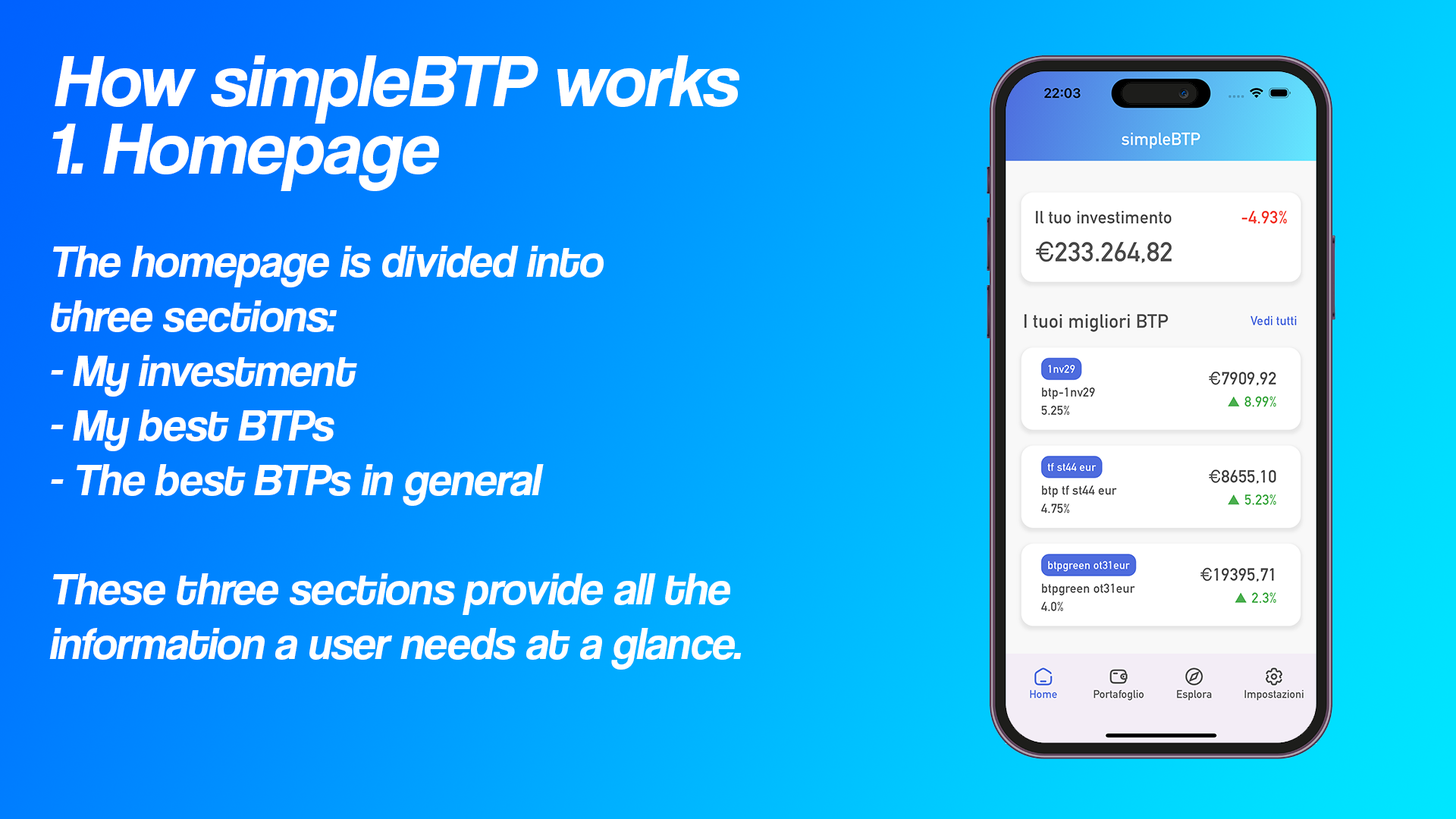
<style>
.page{position:relative;width:1456px;height:819px}
.page>*{position:absolute;margin:0}
.t1{font:75.8px "CoolveticaRg-Italic";color:#ffffff}
.t2{font:45.5px "CoolveticaRg-Italic";color:#ffffff}
</style>
<div class="page">
<p class="t1" style="left:55px;top:55px;width:684px;height:69px">How simpleBTP works</p>
<p class="t1" style="left:52px;top:124px;width:387px;height:67px">1. Homepage</p>
<p class="t2" style="left:49px;top:246px;width:693px;height:424px">The homepage is divided into <br>three sections:<br>- My investment<br>- My best BTPs<br>- The best BTPs in general<br><br>These three sections provide all the<br>information a user needs at a glance.</p>
</div>
